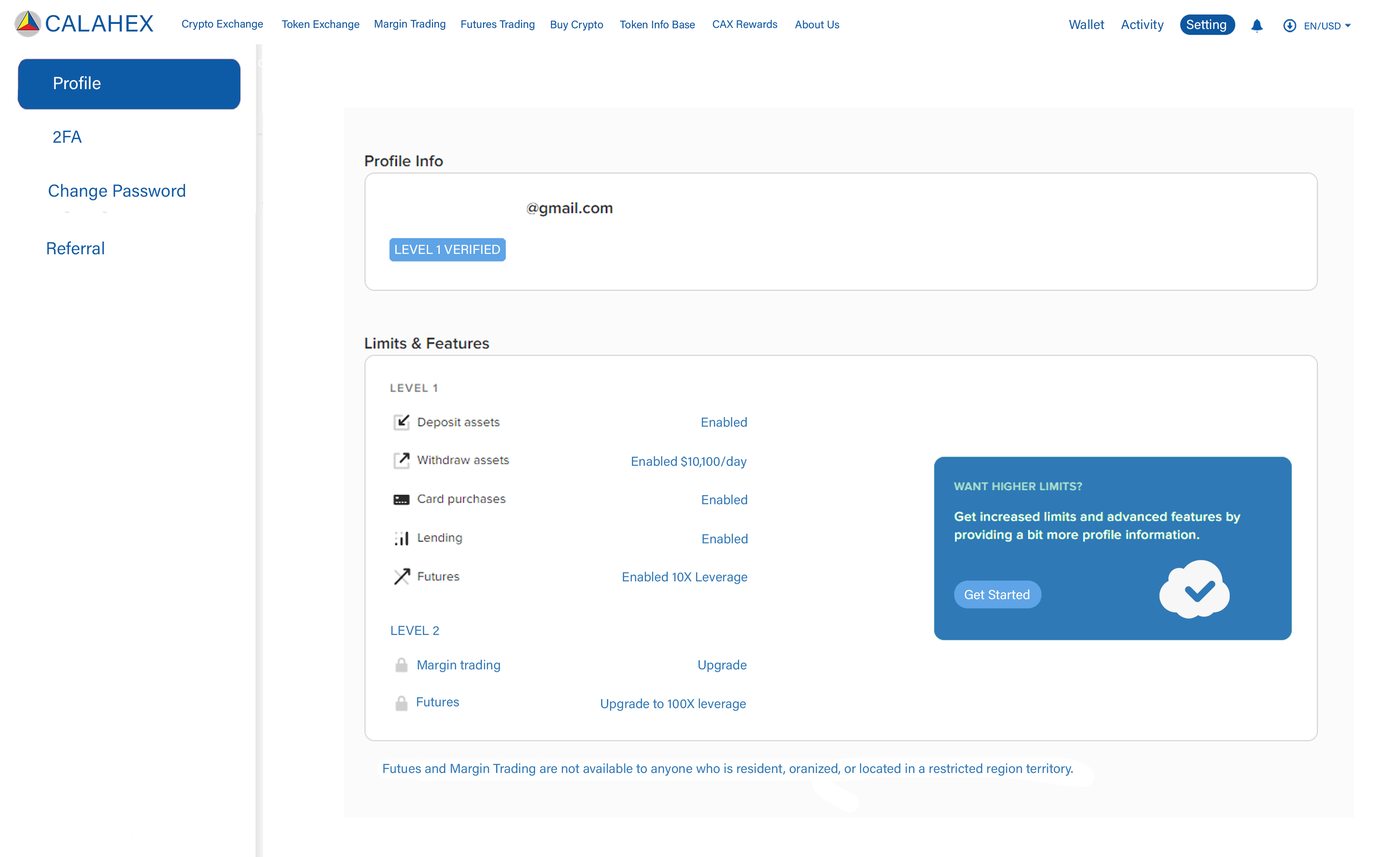
<style>
.page{position:relative;width:1392px;height:857px;background:#ffffff}
.page>*{position:absolute;margin:0}
.t1{font:23.4px "AcuminConcept-Regular";color:#0d57a0;font-style:italic}
.t2{font:10.9px "AcuminConcept-Regular";color:#0d57a0;font-style:italic}
.t3{font:10.9px "AcuminConcept-Regular";color:#0d5ba6;font-style:italic}
.t4{font:9.8px "AcuminConcept-Regular";color:#055aaa;font-style:italic}
.t5{font:17.4px "AcuminConcept-Regular";color:#ffffff;font-style:italic}
.t6{font:17.4px "AcuminConcept-Regular";color:#0d5ba6;font-style:italic}
.t7{font:13px "AcuminConcept-Regular";color:#ffffff;font-style:italic}
.t8{font:13px "AcuminConcept-Regular";color:#2f79b7;font-style:italic}
</style>
<div class="page">
<p class="t1" style="left:46px;top:15px;width:108px;height:17px">CALAHEX</p>
<p class="t2" style="left:182px;top:19px;width:81px;height:11px">Crypto Exchange</p>
<p class="t2" style="left:282px;top:20px;width:77px;height:10px">Token Exchange</p>
<p class="t2" style="left:374px;top:19px;width:71px;height:11px">Margin Trading</p>
<p class="t2" style="left:461px;top:20px;width:73px;height:10px">Futures Trading</p>
<p class="t2" style="left:551px;top:20px;width:52px;height:11px">Buy Crypto</p>
<p class="t2" style="left:620px;top:20px;width:75px;height:9px">Token Info Base</p>
<p class="t3" style="left:712px;top:20px;width:65px;height:8px">CAX Rewards</p>
<p class="t3" style="left:795px;top:20px;width:44px;height:9px">About Us</p>
<p class="t4" style="left:1304px;top:22px;width:36px;height:8px">EN/USD</p>
<p class="t5" style="left:54px;top:76px;width:47px;height:13px">Profile</p>
<p class="t6" style="left:53px;top:130px;width:29px;height:13px">2FA</p>
<p class="t6" style="left:49px;top:184px;width:136px;height:16px">Change Password</p>
<p class="t6" style="left:47px;top:241px;width:57px;height:14px">Referral</p>
<p class="t7" style="left:395px;top:245px;width:105px;height:9px">LEVEL 1 VERIFIED</p>
<p class="t8" style="left:702px;top:417px;width:44px;height:10px">Enabled</p>
<p class="t8" style="left:632px;top:456px;width:114px;height:13px">Enabled $10,100/day</p>
<p class="t8" style="left:702px;top:494px;width:45px;height:11px">Enabled</p>
<p class="t8" style="left:702px;top:533px;width:45px;height:11px">Enabled</p>
<p class="t8" style="left:623px;top:572px;width:124px;height:12px">Enabled 10X Leverage</p>
<p class="t7" style="left:964px;top:589px;width:65px;height:10px">Get Started</p>
<p class="t8" style="left:391px;top:626px;width:48px;height:9px">LEVEL 2</p>
<p class="t8" style="left:418px;top:660px;width:82px;height:12px">Margin trading</p>
<p class="t8" style="left:698px;top:660px;width:48px;height:12px">Upgrade</p>
<p class="t8" style="left:417px;top:697px;width:42px;height:10px">Futures</p>
<p class="t8" style="left:601px;top:698px;width:145px;height:13px">Upgrade to 100X leverage</p>
<p class="t8" style="left:383px;top:763px;width:689px;height:13px">Futues and Margin Trading are not available to anyone who is resident, oranized, or located in a restricted region territory.</p>
</div>
